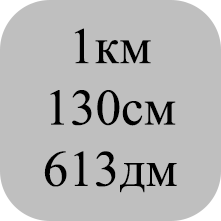
<style>
.page{position:relative;width:221px;height:221px;background:#bfbfbf}
.page>*{position:absolute;margin:0}
.t1{font:51.1px "TimesNewRomanPSMT";color:#000000}
</style>
<div class="page">
<p class="t1" style="left:44px;top:28px;width:133px;height:165px;text-align:center">1км<br>130см<br>613дм</p>
</div>
